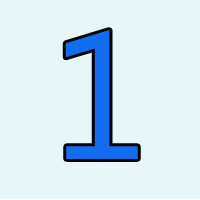
<style>
.page{position:relative;width:200px;height:200px;background:#e7f6fa}
.page>*{position:absolute;margin:0}
.t1{font:180px "MicrosoftPhagsPa";color:#106eef}
</style>
<div class="page">
<p class="t1" style="left:65px;top:30px;width:73px;height:129px">1</p>
</div>
